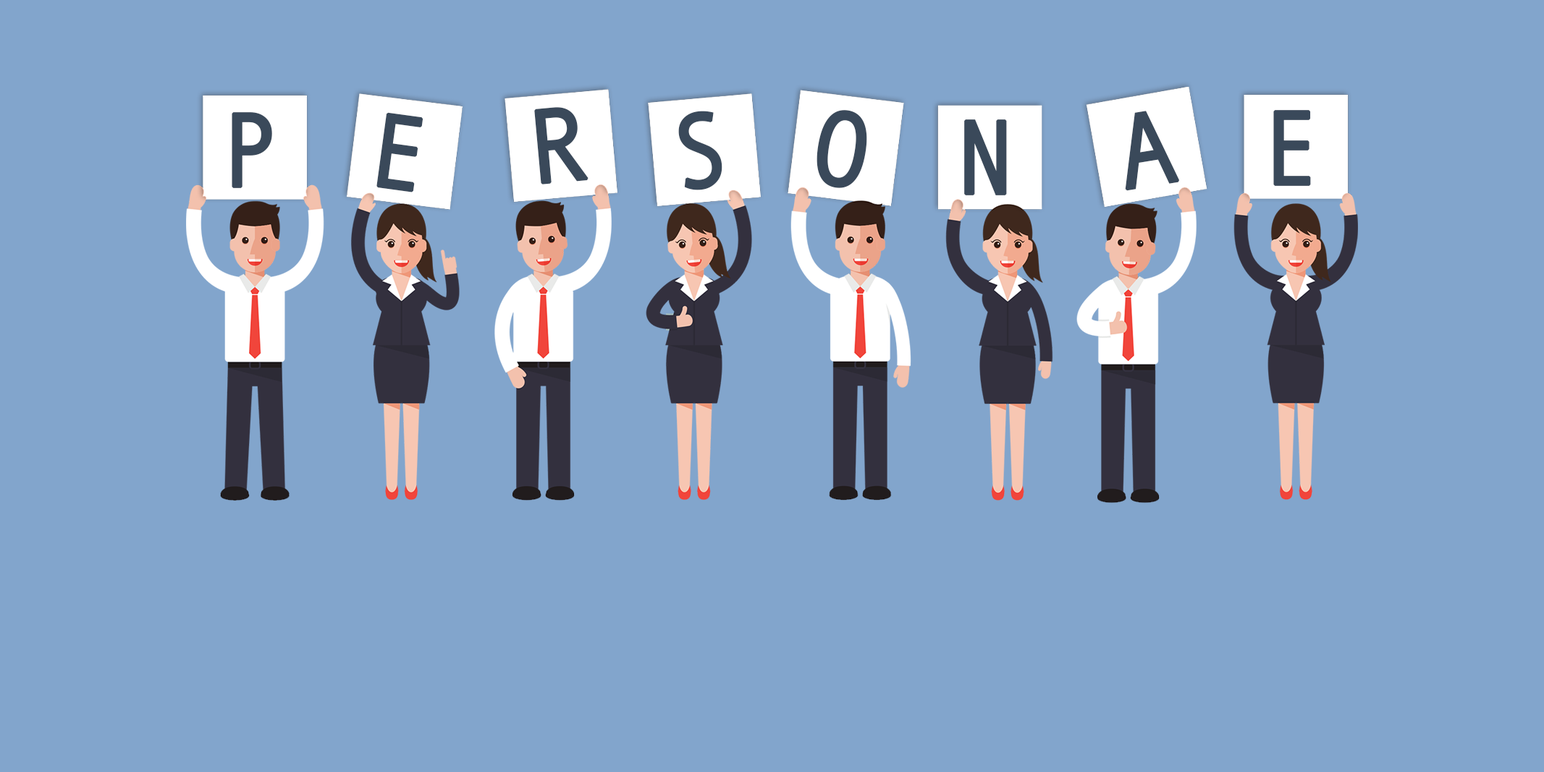
<style>
.page{position:relative;width:1544px;height:772px;background:#82a5cc}
.page>*{position:absolute;margin:0}
.t1{font:105.6px "AndaleMono";color:#3a495a;font-weight:bold;scale:0.9 1}
</style>
<div class="page">
<p class="t1" style="left:232px;top:112px;width:40px;height:76px">P</p>
<p class="t1" style="left:376px;top:112px;width:47px;height:81px;rotate:8deg">E</p>
<p class="t1" style="left:534px;top:107px;width:54px;height:78px;rotate:-5deg">R</p>
<p class="t1" style="left:678px;top:111px;width:44px;height:79px;rotate:-6deg">S</p>
<p class="t1" style="left:816px;top:110px;width:51px;height:78px;rotate:9deg">O</p>
<p class="t1" style="left:1125px;top:111px;width:55px;height:80px;rotate:-9deg">A</p>
<p class="t1" style="left:1273px;top:110px;width:38px;height:76px">E</p>
<p class="t1" style="left:964px;top:119px;width:43px;height:76px">N</p>
</div>
